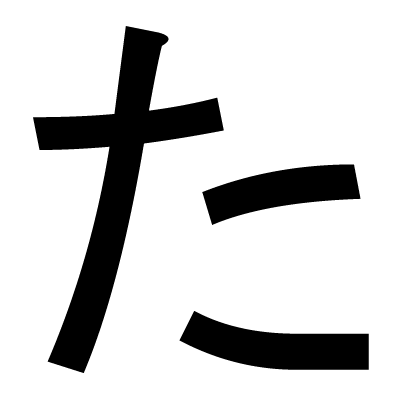
<style>
.page{position:relative;width:400px;height:400px;background:#ffffff}
.page>*{position:absolute;margin:0}
.t1{font:416.7px "MS-PGothic";color:#000000}
</style>
<div class="page">
<p class="t1" style="left:33px;top:26px;width:336px;height:347px">た</p>
</div>
